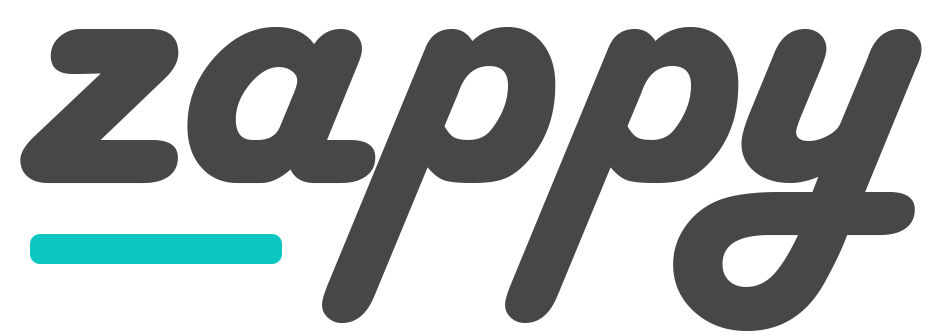
<style>
.page{position:relative;width:932px;height:336px;background:#ffffff}
.page>*{position:absolute;margin:0}
.t1{font:411.5px "HarlowSolid";color:#474747}
</style>
<div class="page">
<p class="t1" style="left:20px;top:27px;width:902px;height:304px">zappy</p>
</div>
